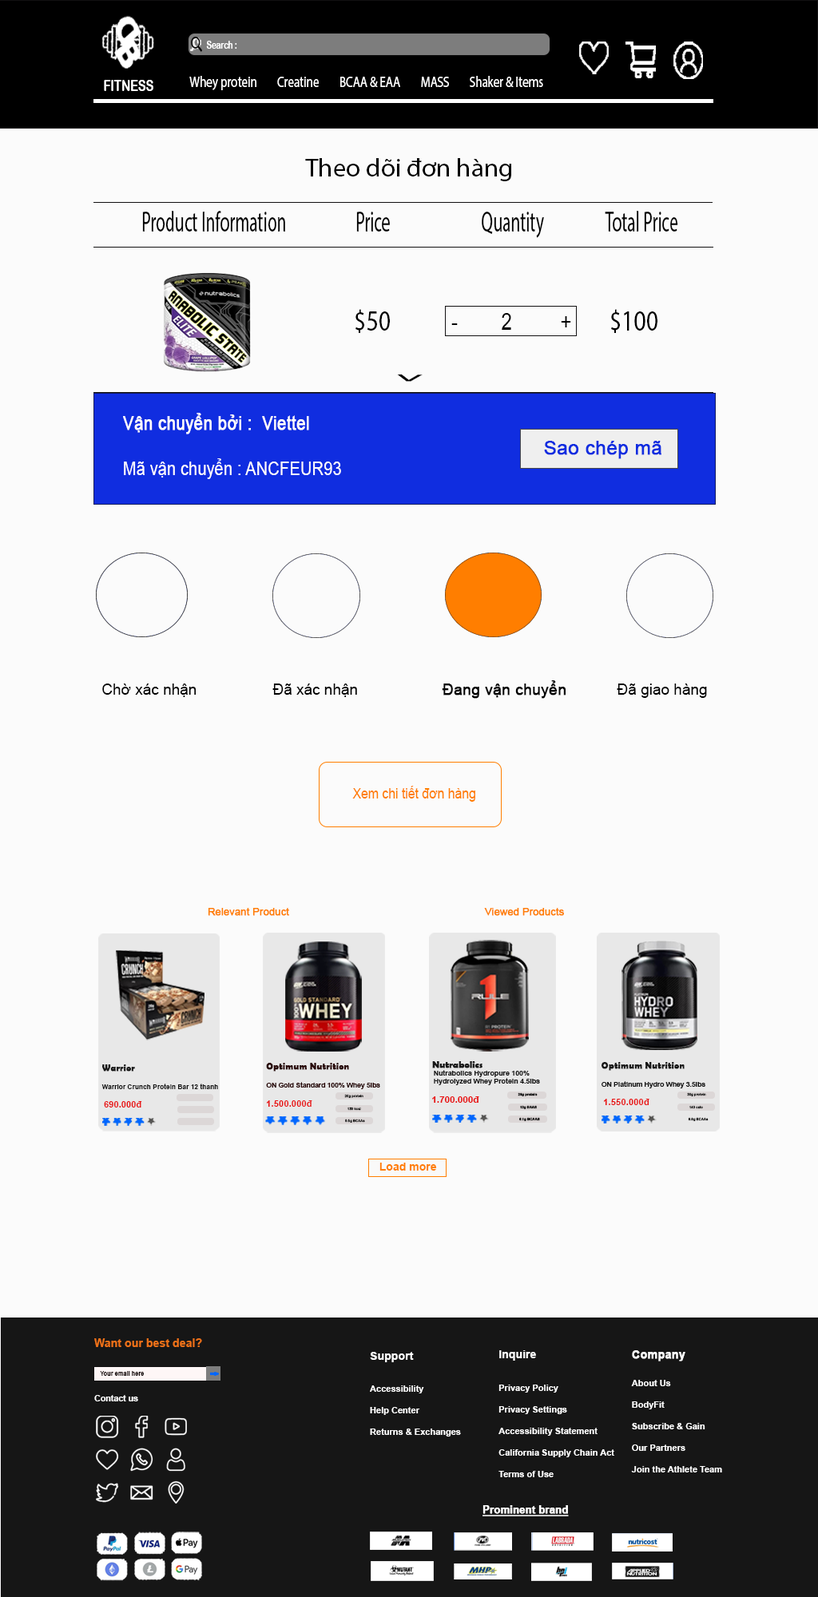
<style>
.page{position:relative;width:818px;height:1597px;background:#fbfbfb}
.page>*{position:absolute;margin:0}
.t1{font:11.2px "ArialRoundedMTBold";color:#ffffff;scale:0.68 1}
.t2{font:8.9px "ArialRoundedMTBold";color:#ffffff;scale:0.68 1}
.t3{font:15.2px "MyriadPro-Regular";color:#ffffff;scale:0.79 1}
.t4{font:14.8px "ArialRoundedMTBold";color:#ffffff;scale:0.79 1}
.t5{font:25.6px "MyriadPro-Regular";color:#000000}
.t6{font:28.7px "MyriadPro-Regular";color:#000000;scale:0.6 1}
.t7{font:28.7px "MyriadPro-Regular";color:#000000;scale:0.83 1}
.t8{font:28.7px "MyriadPro-Regular";color:#000000;font-weight:bold;scale:0.83 1}
.t9{font:23.2px "ArialMT";color:#000000;scale:0.84 1}
.t10{font:51.2px "ArialMT";color:#000000;scale:0.28 1}
.t11{font:19.2px "ArialMT";color:#fffdfd;font-weight:bold;scale:0.85 1}
.t12{font:19.2px "ArialMT";color:#fffdfd;scale:0.85 1}
.t13{font:19.2px "ArialMT";color:#102de0;font-weight:bold}
.t14{font:15.2px "ArialMT";color:#000000}
.t15{font:15.2px "ArialMT";color:#000000;font-weight:bold}
.t16{font:14.4px "ArialMT";color:#ff7e00;scale:0.88 1}
.t17{font:9.9px "ArialMT";color:#ff7e00;font-weight:bold}
.t18{font:6.7px "Arial-BoldMT";color:#161616;scale:1.05 1}
.t19{font:8.9px "BerlinSansFBDemi-Bold";color:#161616;font-weight:bold;scale:1.05 1}
.t20{font:8.9px "Arial-BoldMT";color:#e81313;scale:1.05 1}
.t21{font:6.6px "Arial-BoldMT";color:#161616}
.t22{font:8.8px "BerlinSansFBDemi-Bold";color:#161616;font-weight:bold}
.t23{font:8.8px "Arial-BoldMT";color:#e81313}
.t24{font:6.7px "Arial-BoldMT";color:#280505}
.t25{font:8.9px "BerlinSansFBDemi-Bold";color:#280505;font-weight:bold}
.t26{font:8.9px "Arial-BoldMT";color:#e81313}
.t27{font:8.9px "BerlinSansFBDemi-Bold";color:#161616;font-weight:bold}
.t28{font:3.3px "Arial-BoldMT";color:#161616}
.t29{font:3.3px "Arial-BoldMT";color:#161616;scale:1.05 1}
.t30{font:11.1px "Arial-BoldMT";color:#ff7e00}
.t31{font:11.6px "Arial-BoldMT";color:#eb7018}
.t32{font:9px "Arial-BoldMT";color:#ffffff}
.t33{font:11.6px "Arial-BoldMT";color:#ffffff}
.t34{font:11.6px "Arial-BoldMT";color:#ffffff;font-weight:bold}
.t35{font:6.1px "Arial-BoldMT";color:#0d0101}
.t36{font:8.7px "Arial-BoldMT";color:#ffffff}
.t37{font:10.4px "Arial-BoldMT";color:#ffffff;font-weight:bold;text-decoration:underline}
</style>
<div class="page">
<p class="t1" style="left:206px;top:41px;width:31px;height:8px"><span class="t2">   </span>Search :</p>
<p class="t3" style="left:189px;top:76px;width:354px;height:14px">Whey protein        Creatine        BCAA &amp; EAA        MASS        Shaker &amp; Items</p>
<p class="t4" style="left:104px;top:80px;width:49px;height:11px">FITNESS</p>
<p class="t5" style="left:305px;top:158px;width:206px;height:23px">Theo dõi đơn hàng</p>
<p class="t6" style="left:142px;top:211px;width:536px;height:27px">Product Information                   Price                         Quantity                 Total Price</p>
<p class="t7" style="left:355px;top:309px;width:302px;height:24px"><span class="t8">    </span> $50                                           $100</p>
<p class="t9" style="left:451px;top:313px;width:120px;height:17px">-        2         +</p>
<p class="t10" style="left:397px;top:374px;width:25px;height:8px;rotate:102deg">&gt;</p>
<p class="t11" style="left:123px;top:413px;width:218px;height:66px">Vận chuyển bởi :  Viettel<br><span class="t12"><br>Mã vận chuyển : ANCFEUR93</span></p>
<p class="t13" style="left:544px;top:441px;width:117px;height:18px">Sao chép mã</p>
<p class="t14" style="left:102px;top:680px;width:605px;height:19px">Chờ xác nhận                  Đã xác nhận                    <span class="t15">Đang vận chuyển</span>            Đã giao hàng</p>
<p class="t16" style="left:352px;top:786px;width:123px;height:16px">Xem chi tiết đơn hàng</p>
<p class="t17" style="left:208px;top:908px;width:81px;height:8px">Relevant Product</p>
<p class="t17" style="left:484px;top:908px;width:80px;height:8px">Viewed Products</p>
<p class="t18" style="left:432px;top:1061px;width:108px;height:42px"><span class="t19"> Nutrabolics<br></span>  Nutrabolics Hydropure 100% <br>  Hydrolyzed Whey Protein 4.5lbs<br><br> <span class="t20">1.700.000đ</span></p>
<p class="t21" style="left:101px;top:1064px;width:117px;height:44px"><span class="t22">Warrior<br><br></span>Warrior Crunch Protein Bar 12 thanh<br><br> <span class="t23">690.000đ</span></p>
<p class="t24" style="left:266px;top:1063px;width:114px;height:44px"><span class="t25">Optimum Nutrition<br><br></span>ON Gold Standard 100% Whey 5lbs<br><br><span class="t26">1.500.000đ</span></p>
<p class="t21" style="left:601px;top:1062px;width:104px;height:43px"><span class="t27">Optimum Nutrition<br><br></span>ON Platinum Hydro Whey 3.5lbs<br><br> <span class="t26">1.550.000đ</span></p>
<p class="t28" style="left:344px;top:1094px;width:19px;height:4px">20g protein</p>
<p class="t29" style="left:517px;top:1092px;width:20px;height:4px">28g protein</p>
<p class="t28" style="left:687px;top:1092px;width:19px;height:4px">30g protein</p>
<p class="t28" style="left:347px;top:1107px;width:14px;height:4px">130 kcal</p>
<p class="t29" style="left:520px;top:1105px;width:17px;height:4px">13g EAAS</p>
<p class="t28" style="left:689px;top:1105px;width:14px;height:4px">140 calo</p>
<p class="t28" style="left:345px;top:1119px;width:20px;height:4px">5.5g BCAAs</p>
<p class="t29" style="left:519px;top:1117px;width:21px;height:4px">6.1g BCAAS</p>
<p class="t28" style="left:688px;top:1117px;width:20px;height:4px">8.8g BCAAs</p>
<p class="t30" style="left:379px;top:1163px;width:58px;height:8px">Load more</p>
<p class="t31" style="left:94px;top:1338px;width:108px;height:9px">Want our best deal?</p>
<p class="t32" style="left:370px;top:1352px;width:91px;height:85px"><span class="t33">Support<br><br></span>Accessibility<br><br>Help Center<br><br>Returns &amp; Exchanges</p>
<p class="t32" style="left:498px;top:1350px;width:116px;height:127px"><span class="t33">Inquire<br><br></span>Privacy Policy<br><br>Privacy Settings<br><br>Accessibility Statement<br><br>California Supply Chain Act<br><br>Terms of Use</p>
<p class="t32" style="left:631px;top:1350px;width:91px;height:122px"><span class="t34">Company<br><br></span>About Us<br><br>BodyFit<br><br>Subscribe &amp; Gain<br><br>Our Partners<br><br>Join the Athlete Team</p>
<p class="t35" style="left:100px;top:1371px;width:44px;height:5px">Your email here</p>
<p class="t36" style="left:94px;top:1395px;width:44px;height:6px">Contact us</p>
<p class="t37" style="left:482px;top:1505px;width:87px;height:11px">Prominent brand</p>
</div>
